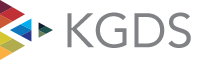
<style>
.page{position:relative;width:208px;height:60px;background:#ffffff}
.page>*{position:absolute;margin:0}
.t1{font:48px "Avenir-Roman";color:#818285}
</style>
<div class="page">
<p class="t1" style="left:67px;top:12px;width:124px;height:36px">KGDS</p>
</div>
